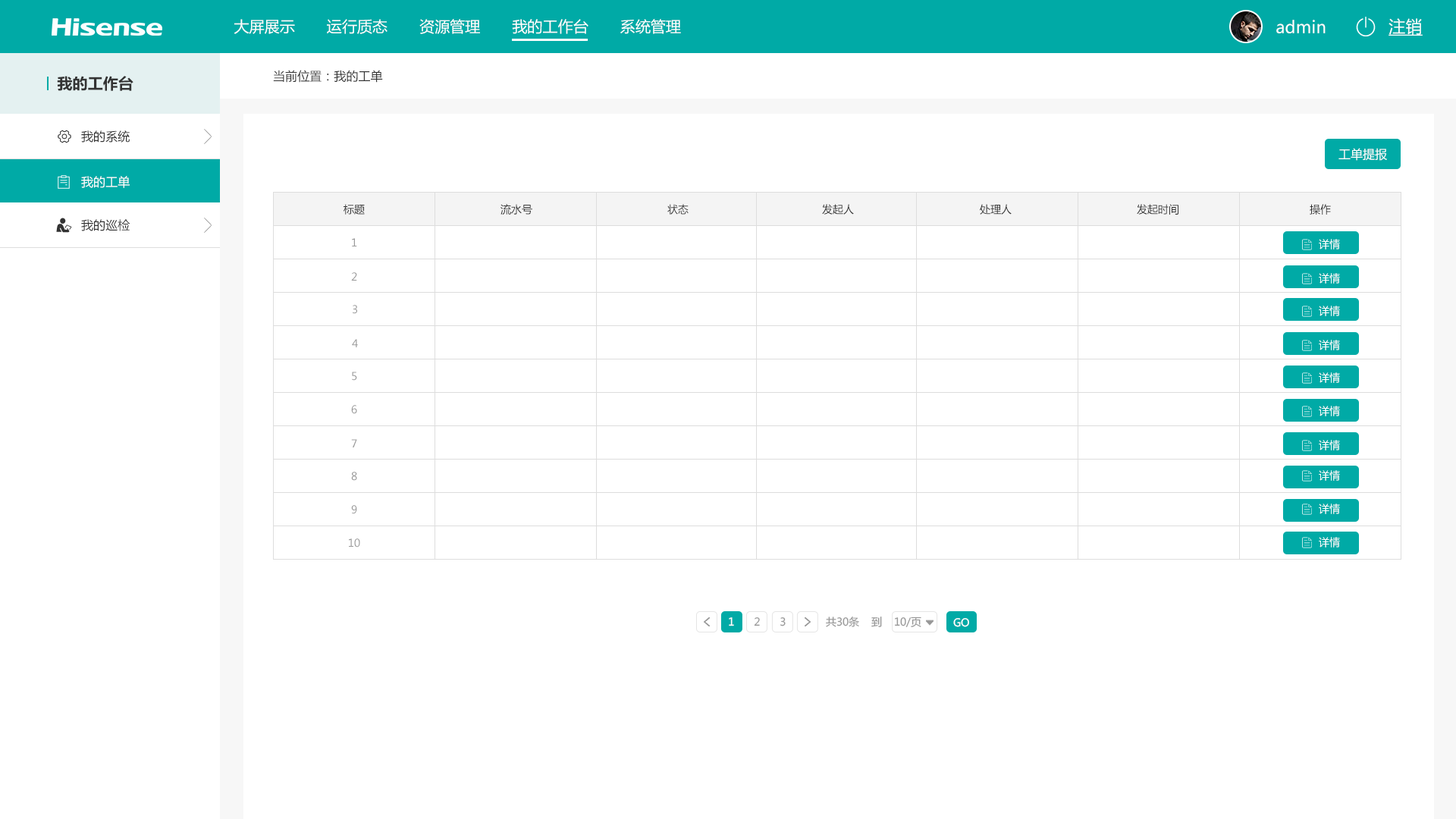
<style>
.page{position:relative;width:1456px;height:819px;background:#ffffff}
.page>*{position:absolute;margin:0}
.t1{font:15.2px "MicrosoftYaHei";letter-spacing:0.004em;color:#ffffff}
.t2{font:16.7px "MicrosoftYaHei";letter-spacing:0.004em;color:#ffffff}
.t3{font:16.7px "MicrosoftYaHei";letter-spacing:0.004em;color:#ffffff;text-decoration:underline}
.t4{font:15.2px "MicrosoftYaHei-Bold";letter-spacing:0.004em;color:#333333}
.t5{font:12.1px "MicrosoftYaHei";letter-spacing:0.004em;color:#333333}
.t6{font:12.1px "MicrosoftYaHei";letter-spacing:0.004em;color:#ffffff}
.t7{font:10.6px "MicrosoftYaHei";letter-spacing:0.004em;color:#333333}
.t8{font:10.6px "MicrosoftYaHei";letter-spacing:0.004em;color:#999999}
.t9{font:10.6px "MicrosoftYaHei";letter-spacing:0.004em;color:#ffffff}
.t10{font:10.6px "MicrosoftYaHei";color:#ffffff}
.t11{font:10.6px "MicrosoftYaHei";color:#999999}
</style>
<div class="page">
<p class="t1" style="left:234px;top:19px;width:447px;height:15px">大屏展示       运行质态       资源管理       我的工作台       系统管理</p>
<p class="t2" style="left:1276px;top:20px;width:50px;height:13px">admin</p>
<p class="t3" style="left:1388px;top:18px;width:35px;height:18px">注销</p>
<p class="t4" style="left:57px;top:76px;width:76px;height:15px">我的工作台</p>
<p class="t5" style="left:273px;top:70px;width:110px;height:13px">当前位置：我的工单</p>
<p class="t5" style="left:81px;top:130px;width:49px;height:13px">我的系统</p>
<p class="t6" style="left:1338px;top:148px;width:49px;height:13px">工单提报</p>
<p class="t6" style="left:81px;top:176px;width:49px;height:12px">我的工单</p>
<p class="t7" style="left:344px;top:204px;width:21px;height:11px">标题</p>
<p class="t7" style="left:500px;top:204px;width:32px;height:11px">流水号</p>
<p class="t7" style="left:667px;top:204px;width:22px;height:11px">状态</p>
<p class="t7" style="left:822px;top:204px;width:32px;height:11px">发起人</p>
<p class="t7" style="left:980px;top:204px;width:32px;height:11px">处理人</p>
<p class="t7" style="left:1137px;top:204px;width:41px;height:11px">发起时间</p>
<p class="t7" style="left:1310px;top:204px;width:21px;height:11px">操作</p>
<p class="t5" style="left:81px;top:219px;width:49px;height:12px">我的巡检</p>
<p class="t8" style="left:352px;top:238px;width:5px;height:8px">1</p>
<p class="t9" style="left:1319px;top:239px;width:21px;height:10px">详情</p>
<p class="t8" style="left:351px;top:272px;width:6px;height:9px">2</p>
<p class="t9" style="left:1319px;top:273px;width:21px;height:11px">详情</p>
<p class="t8" style="left:353px;top:305px;width:4px;height:9px">3</p>
<p class="t9" style="left:1319px;top:306px;width:21px;height:10px">详情</p>
<p class="t8" style="left:352px;top:339px;width:6px;height:8px">4</p>
<p class="t9" style="left:1319px;top:340px;width:21px;height:10px">详情</p>
<p class="t8" style="left:352px;top:372px;width:5px;height:9px">5</p>
<p class="t9" style="left:1319px;top:372px;width:21px;height:11px">详情</p>
<p class="t8" style="left:351px;top:405px;width:6px;height:9px">6</p>
<p class="t9" style="left:1319px;top:406px;width:21px;height:10px">详情</p>
<p class="t8" style="left:351px;top:439px;width:6px;height:8px">7</p>
<p class="t9" style="left:1319px;top:440px;width:21px;height:10px">详情</p>
<p class="t8" style="left:351px;top:472px;width:6px;height:9px">8</p>
<p class="t9" style="left:1319px;top:470px;width:21px;height:11px">详情</p>
<p class="t8" style="left:351px;top:505px;width:6px;height:9px">9</p>
<p class="t9" style="left:1319px;top:504px;width:21px;height:10px">详情</p>
<p class="t8" style="left:349px;top:538px;width:11px;height:10px">10</p>
<p class="t9" style="left:1319px;top:537px;width:21px;height:11px">详情</p>
<p class="t10" style="left:729px;top:617px;width:5px;height:9px">1</p>
<p class="t11" style="left:754px;top:617px;width:6px;height:9px">2</p>
<p class="t11" style="left:780px;top:617px;width:6px;height:9px">3</p>
<p class="t11" style="left:826px;top:617px;width:95px;height:10px">共30条    到    10/页</p>
<p class="t10" style="left:953px;top:618px;width:16px;height:9px">GO</p>
</div>
